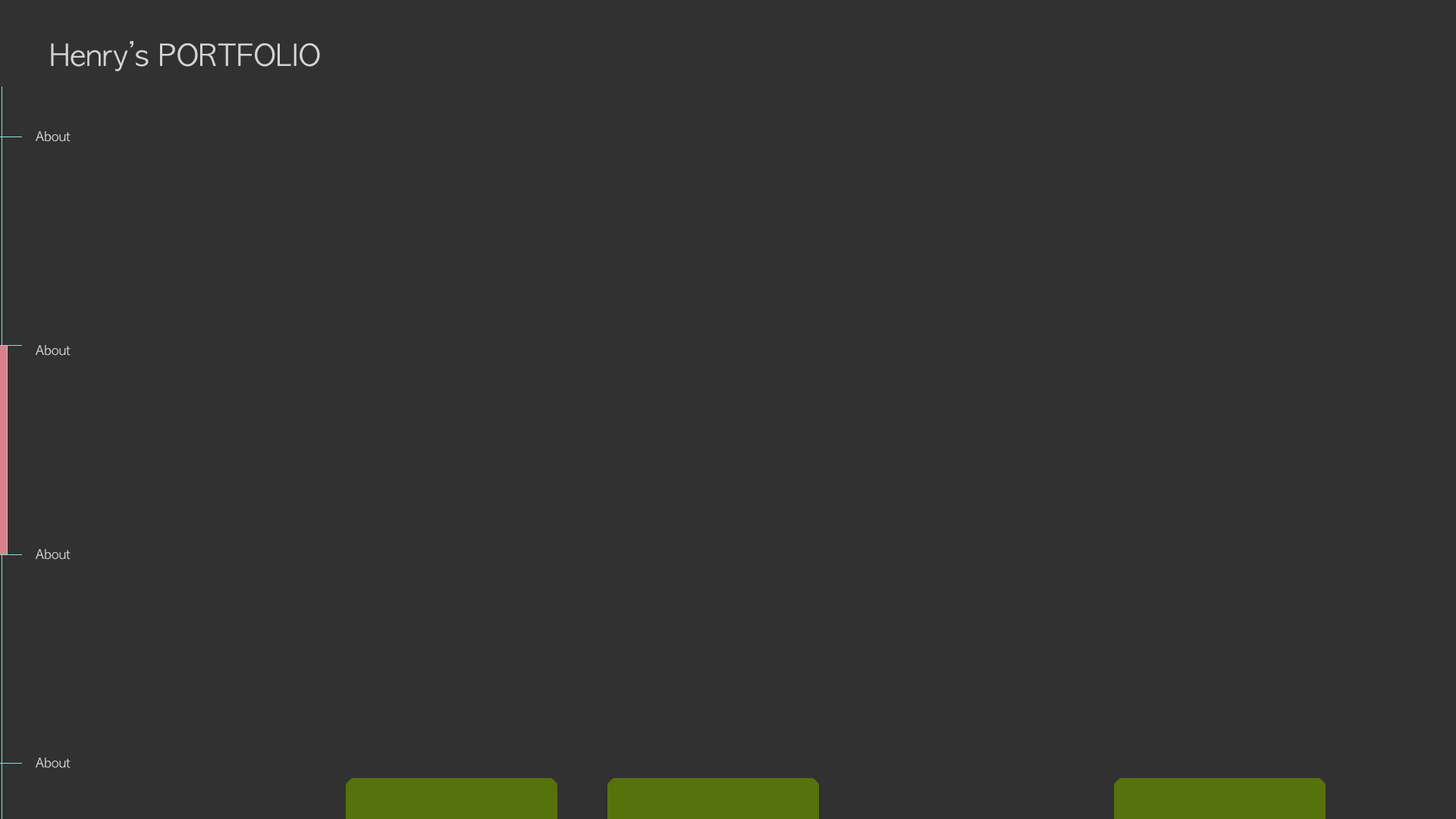
<style>
.page{position:relative;width:1456px;height:819px;background:#313131}
.page>*{position:absolute;margin:0}
.t1{font:28.6px "AppleGothic";letter-spacing:0.01em;color:#d3d3d3}
.t2{font:12.5px "AppleGothic";letter-spacing:0.01em;color:#d3d3d3}
</style>
<div class="page">
<p class="t1" style="left:51px;top:41px;width:269px;height:30px">Henry’s PORTFOLIO</p>
<p class="t2" style="left:36px;top:131px;width:35px;height:11px">About</p>
<p class="t2" style="left:36px;top:345px;width:35px;height:11px">About</p>
<p class="t2" style="left:36px;top:549px;width:35px;height:11px">About</p>
<p class="t2" style="left:36px;top:758px;width:35px;height:10px">About</p>
</div>
